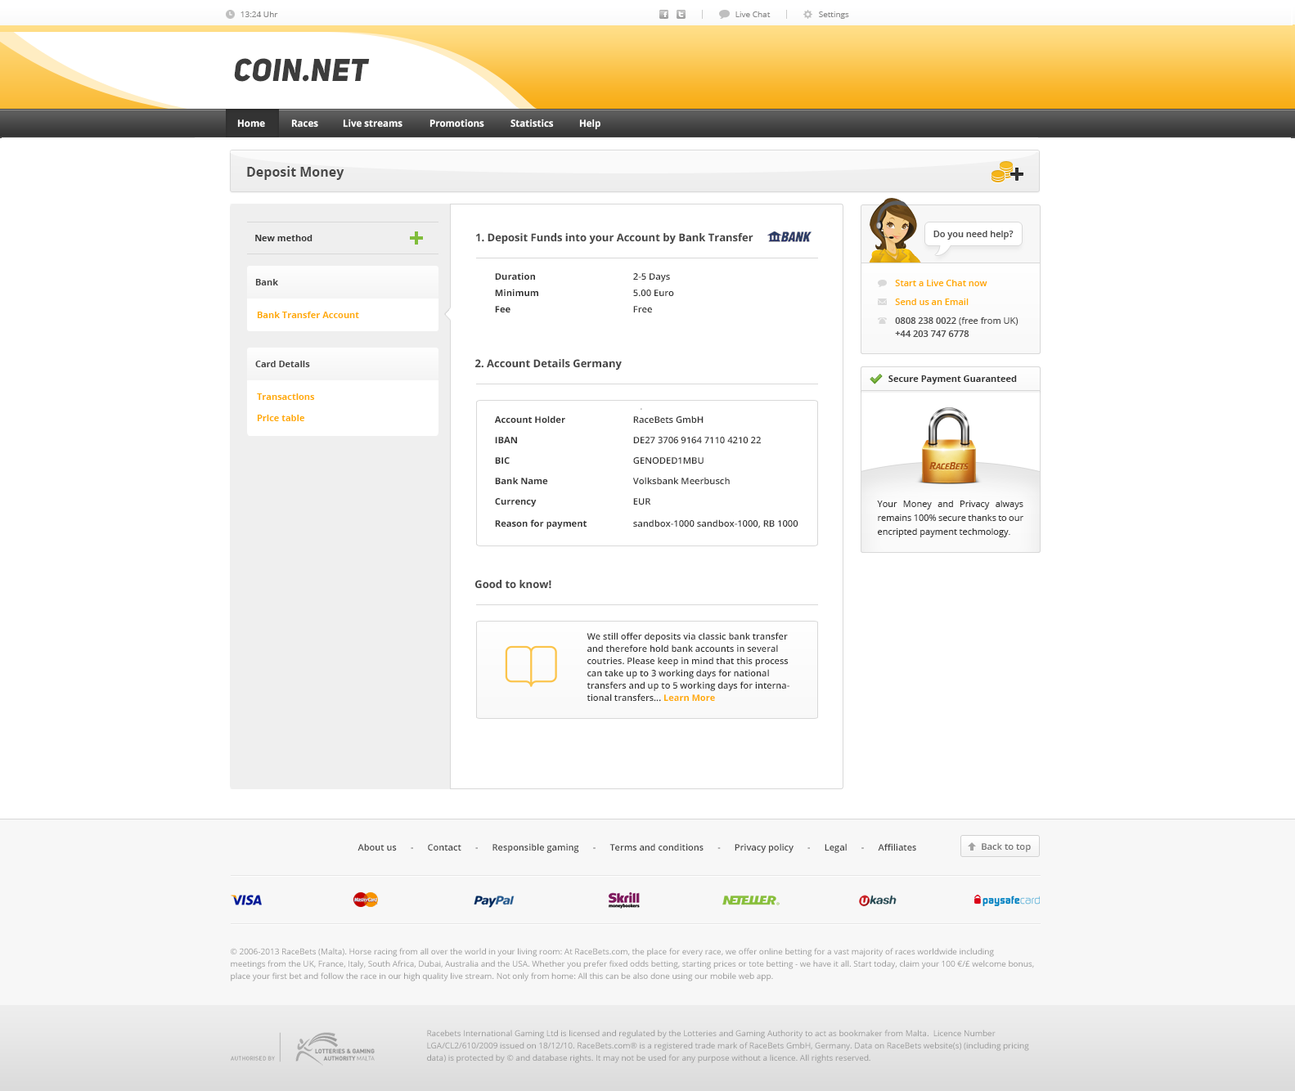
<style>
.page{position:relative;width:1295px;height:1091px;background:#ffffff}
.page>*{position:absolute;margin:0}
.t1{font:31.1px "UniSansHeavyItalicCAPS";letter-spacing:0.02em;color:#3c3c3c;scale:0.97 1}
.t2{font:13.1px "OpenSans-Bold";color:#484848}
.t3{font:10.6px "OpenSans-Bold";color:#444444}
.t4{font:9px "OpenSans-Semibold";color:#4c4c4c}
.t5{font:9px "OpenSans-Bold";color:#333333}
.t6{font:9px "OpenSans-Bold";color:#444444}
.t7{font:9px "OpenSans-Semibold";color:#333333}
.t8{font:9px "OpenSans-Semibold";color:#ffab00}
.t9{font:9px "OpenSans-Bold";color:#ffab00}
.t10{font:9px/13.1px "OpenSans-Semibold";color:#4c4c4c}
.t11{font:9px/13.1px "OpenSans";color:#4c4c4c}
.t12{font:2.1px "OpenSans-Semibold"}
.t13{font:9px/13.9px "OpenSans";color:#333333}
.t14{font:9px/12.3px "OpenSans-Semibold";color:#333333}
.t15{font:9px/12.3px "OpenSans-Bold";color:#ffab00}
</style>
<div class="page">
<p class="t1" style="left:234px;top:58px;width:136px;height:24px">Coin.net</p>
<p class="t2" style="left:247px;top:166px;width:97px;height:14px">Deposit Money</p>
<p class="t3" style="left:475px;top:232px;width:279px;height:13px">1. Deposit Funds into your Account by Bank Transfer</p>
<p class="t4" style="left:934px;top:231px;width:80px;height:9px">Do you need help?</p>
<p class="t5" style="left:255px;top:235px;width:58px;height:6px">New method</p>
<p class="t6" style="left:255px;top:279px;width:23px;height:7px">Bank</p>
<p class="t5" style="left:495px;top:272px;width:40px;height:8px">Duration</p>
<p class="t7" style="left:633px;top:273px;width:37px;height:9px">2-5 Days</p>
<p class="t8" style="left:895px;top:280px;width:93px;height:6px">Start a Live Chat now</p>
<p class="t5" style="left:495px;top:289px;width:43px;height:7px">Minimum</p>
<p class="t7" style="left:633px;top:290px;width:41px;height:7px">5.00 Euro</p>
<p class="t8" style="left:895px;top:299px;width:74px;height:6px">Send us an Email</p>
<p class="t9" style="left:257px;top:312px;width:102px;height:6px">Bank Transfer Account</p>
<p class="t5" style="left:495px;top:306px;width:16px;height:7px">Fee</p>
<p class="t7" style="left:633px;top:306px;width:19px;height:7px">Free</p>
<p class="t10" style="left:895px;top:317px;width:124px;height:20px">0808 238 0022<span class="t11"> (free from UK)<br></span>+44 203 747 6778</p>
<p class="t6" style="left:255px;top:361px;width:55px;height:6px">Card Details</p>
<p class="t3" style="left:475px;top:358px;width:147px;height:13px">2. Account Details Germany</p>
<p class="t5" style="left:889px;top:376px;width:128px;height:9px">Secure Payment Guaranteed</p>
<p class="t9" style="left:257px;top:394px;width:58px;height:6px">Transactions</p>
<p class="t12" style="left:641px;top:408px;width:1px;height:2px">R</p>
<p class="t9" style="left:257px;top:415px;width:48px;height:6px">Price table</p>
<p class="t5" style="left:494px;top:416px;width:71px;height:7px">Account Holder</p>
<p class="t7" style="left:633px;top:416px;width:71px;height:7px">RaceBets GmbH</p>
<p class="t5" style="left:495px;top:437px;width:22px;height:6px">IBAN</p>
<p class="t7" style="left:633px;top:437px;width:128px;height:6px">DE27 3706 9164 7110 4210 22</p>
<p class="t5" style="left:495px;top:457px;width:15px;height:7px">BIC</p>
<p class="t7" style="left:633px;top:457px;width:71px;height:7px">GENODED1MBU</p>
<p class="t5" style="left:495px;top:477px;width:53px;height:7px">Bank Name</p>
<p class="t7" style="left:632px;top:477px;width:98px;height:7px">Volksbank Meerbusch</p>
<p class="t5" style="left:495px;top:498px;width:42px;height:9px">Currency</p>
<p class="t7" style="left:633px;top:498px;width:18px;height:7px">EUR</p>
<p class="t13" style="left:877px;top:501px;width:147px;height:37px;text-align:justify">Your Money and Privacy always remains 100% secure thanks to our encripted payment techmology.</p>
<p class="t5" style="left:495px;top:520px;width:92px;height:9px">Reason for payment</p>
<p class="t7" style="left:633px;top:520px;width:166px;height:9px">sandbox-1000 sandbox-1000, RB 1000</p>
<p class="t3" style="left:475px;top:579px;width:76px;height:10px">Good to know!</p>
<p class="t14" style="left:587px;top:632px;width:203px;height:70px">We still offer deposits via classic bank transfer and therefore hold bank accounts in several coutries. Please keep in mind that this process can take up to 3 working days for national transfers and up to 5 working days for international transfers... <span class="t15">Learn More</span></p>
</div>
